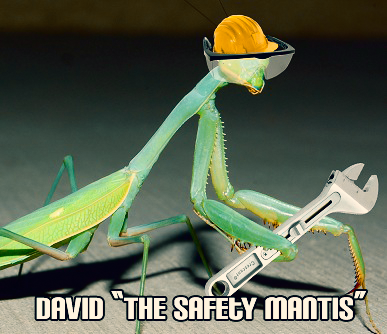
<style>
.page{position:relative;width:387px;height:334px}
.page>*{position:absolute;margin:0}
.t1{font:36px "CarbonBlock";color:#fff4df}
</style>
<div class="page">
<p class="t1" style="left:36px;top:291px;width:330px;height:29px">David “The safety MANTIS”</p>
</div>
